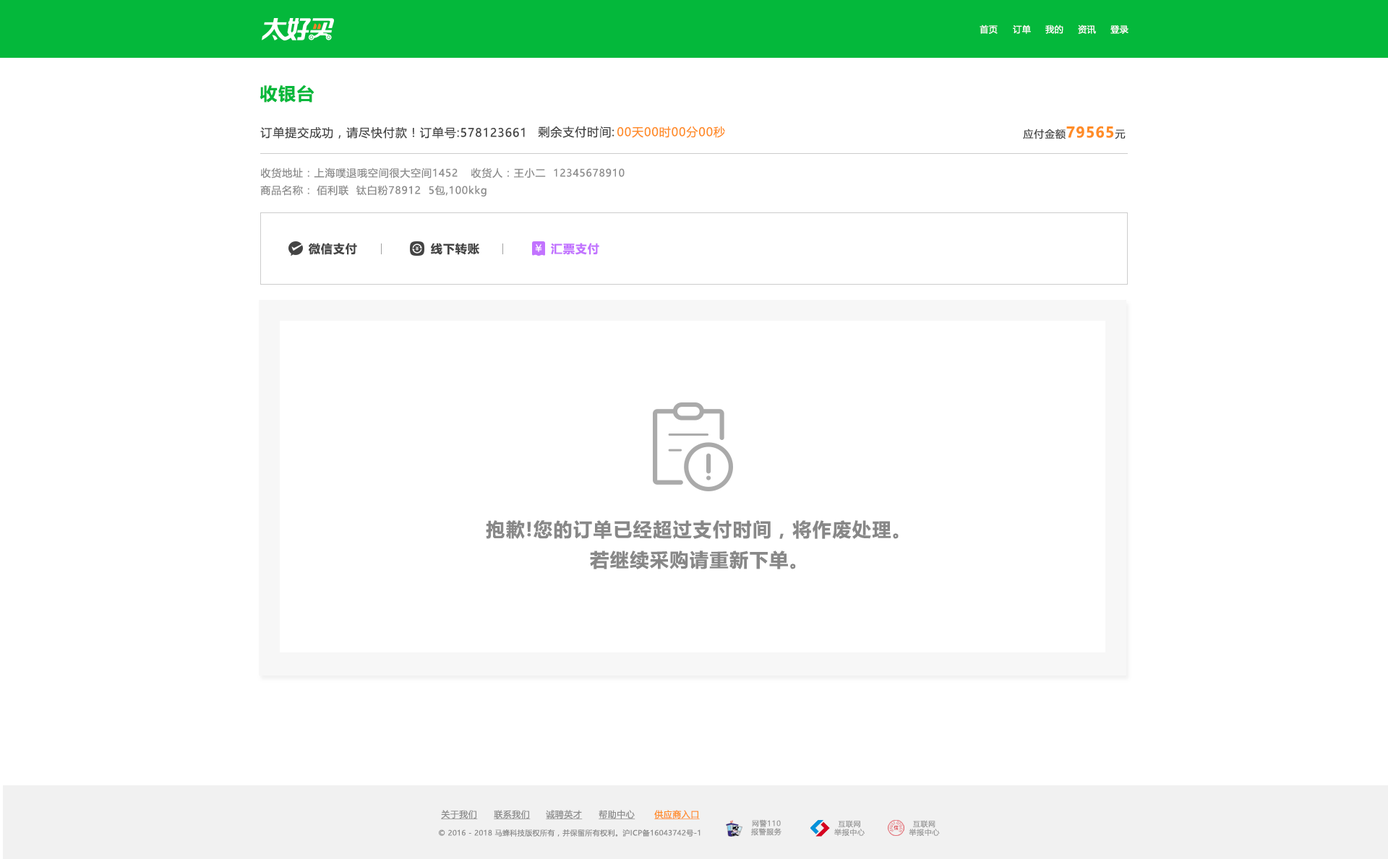
<style>
.page{position:relative;width:1388px;height:859px;background:#ffffff}
.page>*{position:absolute;margin:0}
.t1{font:8.7px "MicrosoftYaHeiUI";letter-spacing:0.04em;color:#ffffff}
.t2{font:17.3px "MicrosoftYaHeiUI-Bold";letter-spacing:0.06em;color:#04b83b}
.t3{font:11.6px "MicrosoftYaHeiUI";letter-spacing:0.06em;color:#ff8d27}
.t4{font:14.5px "MicrosoftYaHeiUI-Bold";letter-spacing:0.06em;color:#ff8d27}
.t5{font:10.1px "MicrosoftYaHeiUI";letter-spacing:0.06em;color:#444444}
.t6{font:11.6px "MicrosoftYaHeiUI";letter-spacing:0.06em;color:#444444}
.t7{font:10.1px "MicrosoftYaHeiUI";letter-spacing:0.06em;color:#8c8c8c}
.t8{font:11.6px "MicrosoftYaHeiUI-Bold";letter-spacing:0.06em;color:#444444}
.t9{font:11.6px "MicrosoftYaHeiUI-Bold";letter-spacing:0.06em;color:#c273ff}
.t10{font:18.8px "MicrosoftYaHeiUI-Bold";letter-spacing:0.06em;color:#888888}
.t11{font:8.7px "MicrosoftYaHeiUI";letter-spacing:0.04em;color:#8c8c8c;text-decoration:underline}
.t12{font:8.7px "MicrosoftYaHeiUI";letter-spacing:0.04em;color:#ff8b25;text-decoration:underline}
.t13{font:7.2px/8.4px "MicrosoftYaHei";letter-spacing:0.06em;color:#999999}
.t14{font:7.2px "MicrosoftYaHeiUI";letter-spacing:0.04em;color:#8c8c8c}
</style>
<div class="page">
<p class="t1" style="left:979px;top:25px;width:18px;height:9px">首页</p>
<p class="t1" style="left:1013px;top:25px;width:18px;height:9px">订单</p>
<p class="t1" style="left:1045px;top:25px;width:18px;height:9px">我的</p>
<p class="t1" style="left:1078px;top:25px;width:18px;height:9px">资讯</p>
<p class="t1" style="left:1110px;top:25px;width:18px;height:9px">登录</p>
<p class="t2" style="left:259px;top:85px;width:55px;height:18px">收银台</p>
<p class="t3" style="left:617px;top:126px;width:108px;height:12px">00天00时00分00秒</p>
<p class="t4" style="left:1023px;top:126px;width:102px;height:13px"><span class="t5">应付金额</span>79565<span class="t5">元</span></p>
<p class="t6" style="left:260px;top:126px;width:265px;height:13px">订单提交成功，请尽快付款！订单号:578123661</p>
<p class="t6" style="left:538px;top:126px;width:76px;height:12px">剩余支付时间:</p>
<p class="t7" style="left:260px;top:168px;width:197px;height:11px">收货地址：上海噗退哦空间很大空间1452</p>
<p class="t7" style="left:470px;top:168px;width:154px;height:11px">收货人：王小二  12345678910</p>
<p class="t7" style="left:260px;top:185px;width:49px;height:11px">商品名称：</p>
<p class="t7" style="left:317px;top:185px;width:169px;height:12px">佰利联  钛白粉78912  5包,100kkg</p>
<p class="t8" style="left:309px;top:243px;width:48px;height:12px">微信支付</p>
<p class="t8" style="left:431px;top:243px;width:48px;height:12px">线下转账</p>
<p class="t9" style="left:551px;top:243px;width:48px;height:12px">汇票支付</p>
<p class="t10" style="left:486px;top:520px;width:412px;height:19px">抱歉!您的订单已经超过支付时间，将作废处理。</p>
<p class="t10" style="left:590px;top:551px;width:206px;height:19px">若继续采购请重新下单。</p>
<p class="t11" style="left:441px;top:810px;width:37px;height:10px">关于我们</p>
<p class="t11" style="left:494px;top:810px;width:36px;height:10px">联系我们</p>
<p class="t11" style="left:546px;top:810px;width:37px;height:10px">诚聘英才</p>
<p class="t11" style="left:598px;top:810px;width:37px;height:10px">帮助中心</p>
<p class="t12" style="left:654px;top:810px;width:46px;height:10px">供应商入口</p>
<p class="t13" style="left:751px;top:820px;width:30px;height:16px;text-align:center">网警110<br>报警服务</p>
<p class="t13" style="left:834px;top:820px;width:30px;height:16px;text-align:center">互联网<br>举报中心</p>
<p class="t13" style="left:908px;top:820px;width:32px;height:16px;text-align:center">互联网<br>举报中心</p>
<p class="t14" style="left:439px;top:829px;width:261px;height:8px">© 2016 - 2018 马蜂科技版权所有，并保留所有权利。沪ICP备16043742号-1</p>
</div>
